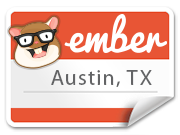
<style>
.page{position:relative;width:180px;height:135px;background:#ffffff}
.page>*{position:absolute;margin:0}
.t1{font:22.2px "MyriadPro-Regular";letter-spacing:0.05em;color:#636466}
</style>
<div class="page">
<p class="t1" style="left:51px;top:70px;width:101px;height:17px">Austin, TX</p>
</div>
